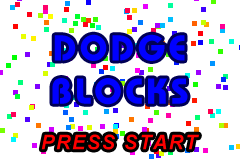
<style>
.page{position:relative;width:240px;height:160px;background:#ffffff}
.page>*{position:absolute;margin:0}
.t1{font:36px "BauhausStd-Bold";letter-spacing:0.08em;color:#0000ff;text-transform:uppercase}
.t2{font:20px "Arial-BoldItalicMT";letter-spacing:0.08em;color:#ff0000;text-transform:uppercase}
</style>
<div class="page">
<p class="t1" style="left:52px;top:34px;width:136px;height:71px;text-align:center">Dodge<br>Blocks</p>
<p class="t2" style="left:41px;top:134px;width:158px;height:16px">Press Start</p>
</div>
